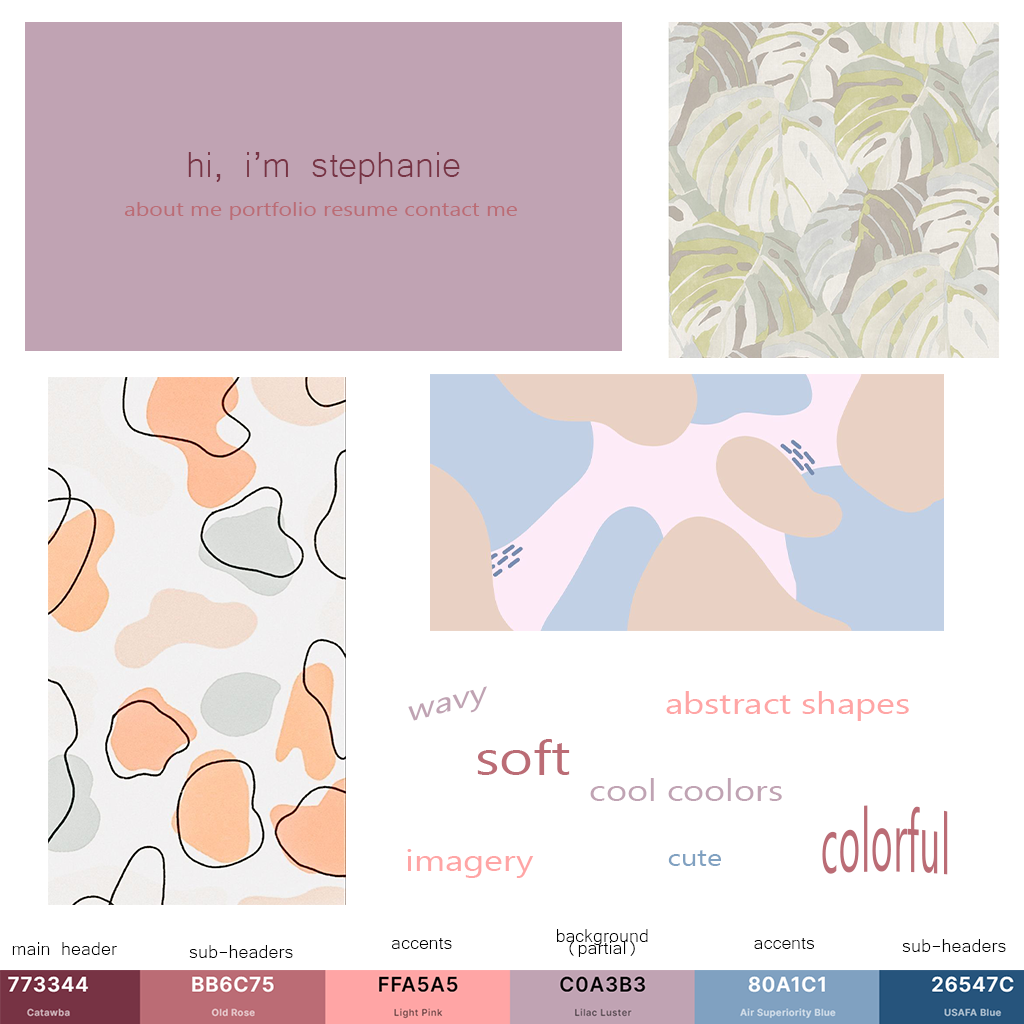
<style>
.page{position:relative;width:1024px;height:1024px;background:#ffffff}
.page>*{position:absolute;margin:0}
.t1{font:46.2px "Microsoft-Yi-Baiti";color:#773344}
.t2{font:19.2px "SegoeUI";color:#bb6c75;scale:1.2 1}
.t3{font:30px "SegoeUI";color:#c0a3b3;scale:1.2 1}
.t4{font:30px "SegoeUI";color:#ffa5a5;scale:1.2 1}
.t5{font:48px "SegoeUI";color:#bb6c75;scale:1.2 1}
.t6{font:30px/12px "SegoeUI";color:#bb6c75;scale:1.2 1}
.t7{font:24px "SegoeUI";color:#80a1c1;scale:1.2 1}
.t8{font:24px/12px "Microsoft-Yi-Baiti";color:#000000}
.t9{font:24px "Microsoft-Yi-Baiti";color:#000000}
</style>
<div class="page">
<p class="t1" style="left:188px;top:152px;width:272px;height:32px">hi, i’m stephanie</p>
<p class="t2" style="left:124px;top:202px;width:393px;height:18px">about me portfolio resume contact me</p>
<p class="t3" style="left:408px;top:686px;width:79px;height:35px">wavy</p>
<p class="t4" style="left:666px;top:691px;width:243px;height:30px">abstract shapes</p>
<p class="t5" style="left:477px;top:739px;width:93px;height:36px">soft</p>
<p class="t3" style="left:590px;top:778px;width:192px;height:23px">cool coolors</p>
<p class="t6" style="left:822px;top:805px;width:126px;height:70px;text-align:center">colorful</p>
<p class="t4" style="left:407px;top:849px;width:127px;height:29px">imagery</p>
<p class="t7" style="left:668px;top:850px;width:53px;height:16px">cute</p>
<p class="t8" style="left:557px;top:929px;width:91px;height:28px;text-align:center">background<br>(partial)</p>
<p class="t9" style="left:12px;top:942px;width:105px;height:13px">main header</p>
<p class="t9" style="left:392px;top:938px;width:60px;height:11px">accents</p>
<p class="t9" style="left:754px;top:938px;width:60px;height:11px">accents</p>
<p class="t9" style="left:902px;top:939px;width:104px;height:13px">sub-headers</p>
<p class="t9" style="left:189px;top:945px;width:104px;height:13px">sub-headers</p>
</div>
